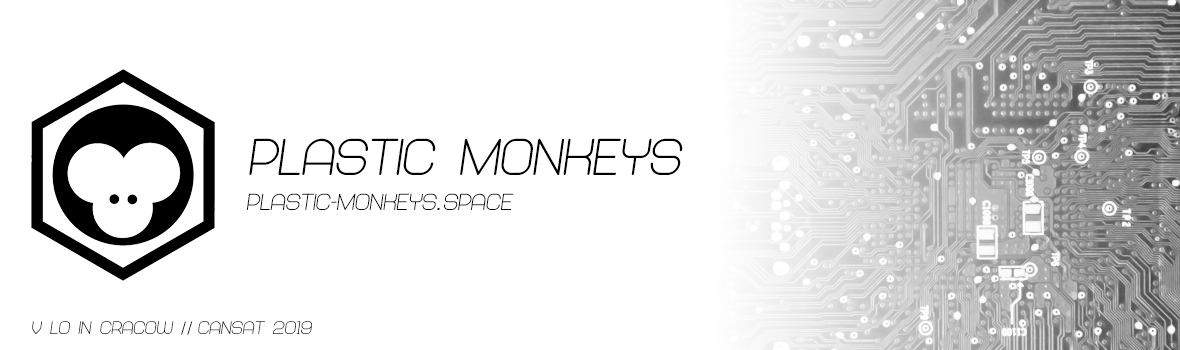
<style>
.page{position:relative;width:1180px;height:350px;background:#ffffff}
.page>*{position:absolute;margin:0}
.t1{font:53.3px "Abandoned-BoldItalic";color:#000000}
.t2{font:24px "Abandoned-BoldItalic";color:#000000}
.t3{font:24px "Arial-ItalicMT";color:#000000}
.t4{font:18.7px "Abandoned-BoldItalic";color:#000000}
.t5{font:18.7px "MinionPro-Regular";color:#000000}
</style>
<div class="page">
<p class="t1" style="left:249px;top:138px;width:434px;height:37px">Plastic Monkeys</p>
<p class="t2" style="left:246px;top:193px;width:268px;height:17px">plastic-monkeys<span class="t3">.</span>space</p>
<p class="t4" style="left:32px;top:321px;width:280px;height:14px">V LO in Cracow <span class="t5">// </span>cansat 2019</p>
</div>
